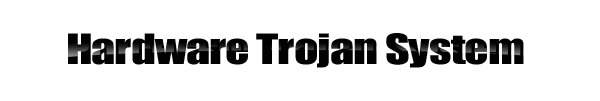
<style>
.page{position:relative;width:600px;height:101px;background:#ffffff}
.page>*{position:absolute;margin:0}
.t1{font:38.4px "Impact";letter-spacing:-0.02em;color:#020202;scale:1.25 1}
</style>
<div class="page">
<p class="t1" style="left:68px;top:33px;width:456px;height:35px">Hardware Trojan System</p>
</div>
